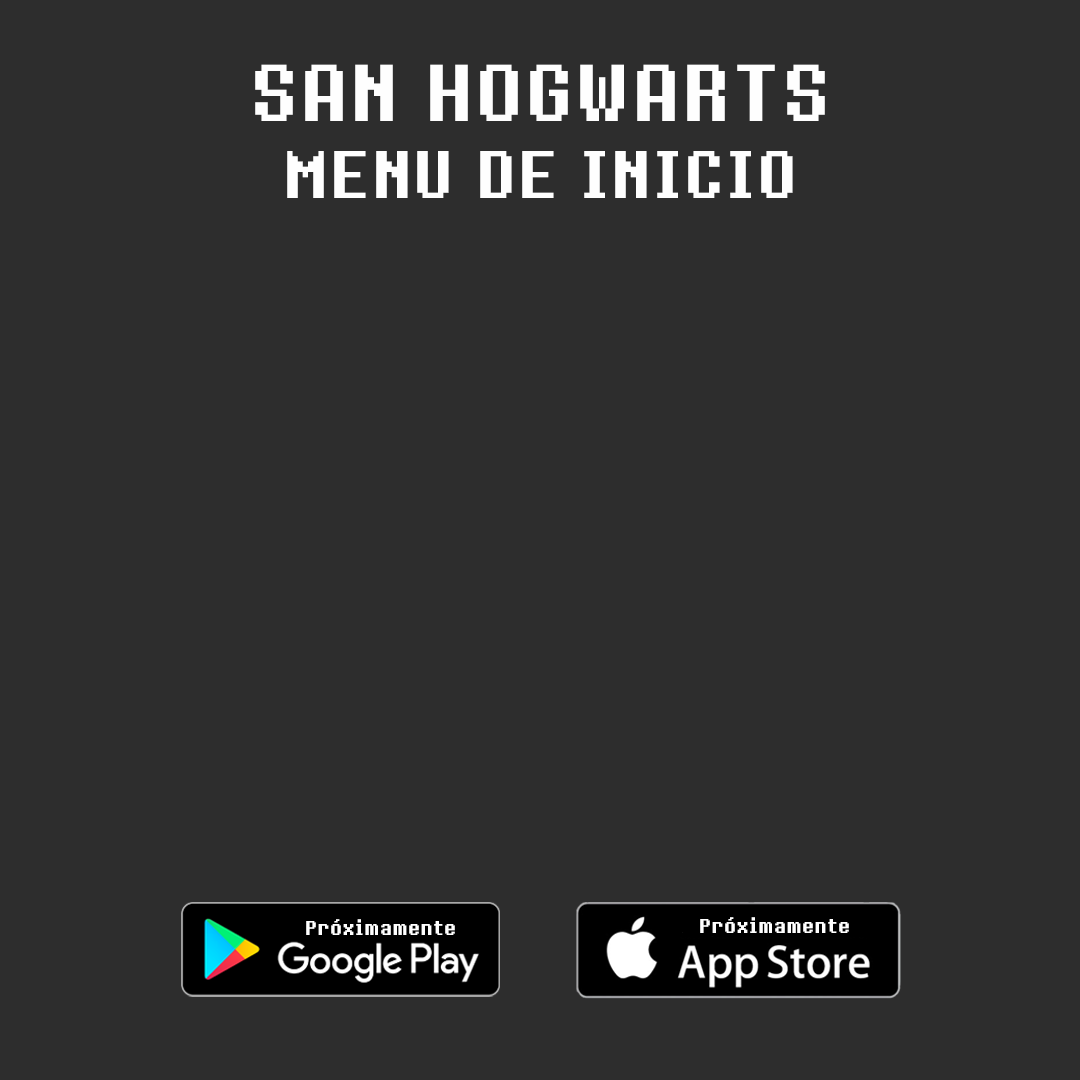
<style>
.page{position:relative;width:1080px;height:1080px;background:#2d2d2d}
.page>*{position:absolute;margin:0}
.t1{font:72px "8bitOperatorPlus-Bold";color:#fefefe}
.t2{font:60px "8bitOperatorPlus-Bold";color:#fefefe}
.t3{font:18px "8bitOperatorPlus-Bold";color:#ffffff}
</style>
<div class="page">
<p class="t1" style="left:255px;top:64px;width:570px;height:57px">SAN HOGWARTS</p>
<p class="t2" style="left:287px;top:151px;width:506px;height:47px">MENU DE INICIO</p>
<p class="t3" style="left:700px;top:917px;width:149px;height:16px">Próximamente</p>
<p class="t3" style="left:306px;top:919px;width:149px;height:16px">Próximamente</p>
</div>
